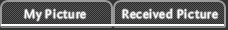
<style>
.page{position:relative;width:228px;height:30px}
.page>*{position:absolute;margin:0}
.t1{font:12px "Amira-Roman";letter-spacing:0.075em;color:#ffffff}
</style>
<div class="page">
<p class="t1" style="left:24px;top:9px;width:62px;height:12px">My Picture</p>
<p class="t1" style="left:122px;top:9px;width:96px;height:10px">Received Picture</p>
</div>
